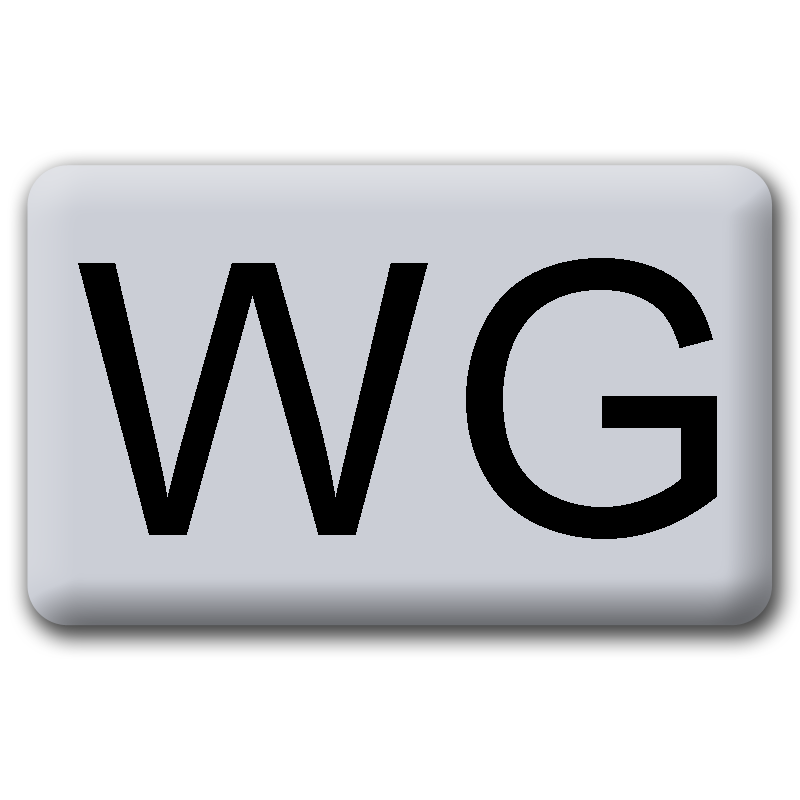
<style>
.page{position:relative;width:800px;height:800px;background:#ffffff}
.page>*{position:absolute;margin:0}
.t1{font:378.5px "ArialMT";color:#000000}
</style>
<div class="page">
<p class="t1" style="left:78px;top:258px;width:639px;height:281px">WG</p>
</div>
